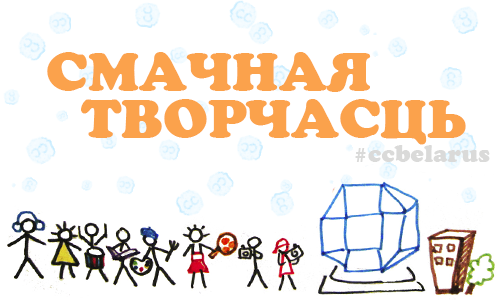
<style>
.page{position:relative;width:500px;height:300px;background:#ffffff}
.page>*{position:absolute;margin:0}
.t1{font:55px/48px "AGCooperCyrRoman";color:#fba24c}
.t2{font:24px "AGCooperCyrRoman";color:#dadad9}
</style>
<div class="page">
<p class="t1" style="left:47px;top:52px;width:419px;height:93px">СМАЧНАЯ<br>  ТВОРЧАСЦЬ</p>
<p class="t2" style="left:355px;top:145px;width:135px;height:17px">#ccbelarus</p>
</div>
